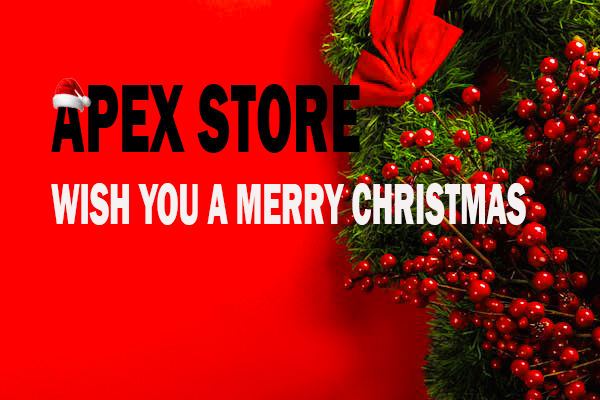
<style>
.page{position:relative;width:600px;height:400px;background:#ff0000}
.page>*{position:absolute;margin:0}
.t1{font:60px "FranklinGothic-Heavy";color:#f6f2f2;scale:0.53 1}
.t2{font:100.4px "FranklinGothic-Heavy";color:#000000;scale:0.53 1}
</style>
<div class="page">
<p class="t1" style="left:51px;top:84px;width:475px;height:141px"><span class="t2">APEX STORE<br></span>WISH YOU A MERRY CHRISTMAS</p>
</div>
